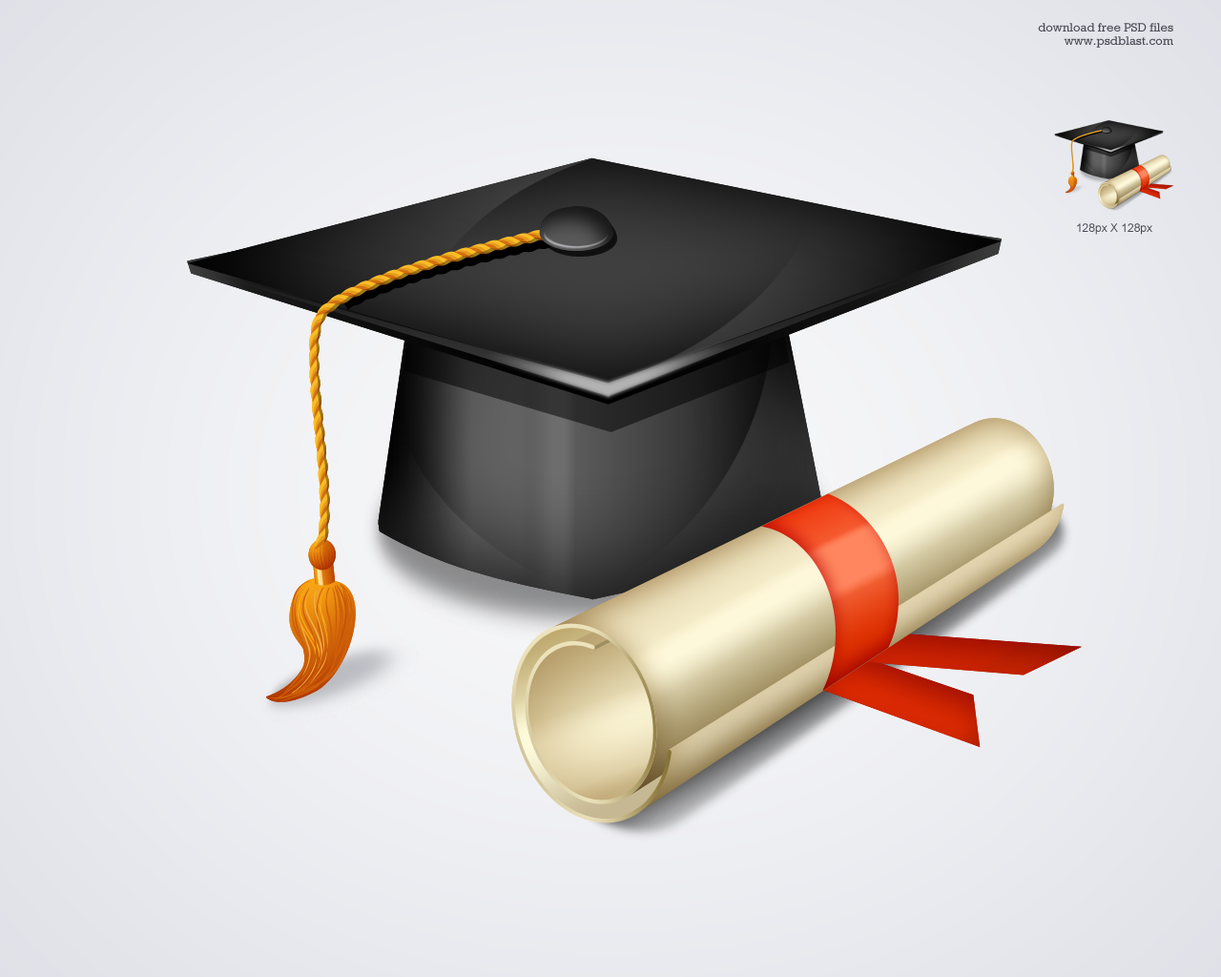
<style>
.page{position:relative;width:1221px;height:977px}
.page>*{position:absolute;margin:0}
.t1{font:12.4px/13.4px "Rockwell";color:#4a4c55}
.t2{font:11.4px "ArialMT";color:#4a4c55}
</style>
<div class="page">
<p class="t1" style="left:1038px;top:23px;width:135px;height:25px;text-align:right">download free PSD files<br>www.psdblast.com</p>
<p class="t2" style="left:1077px;top:223px;width:75px;height:12px">128px X 128px</p>
</div>
